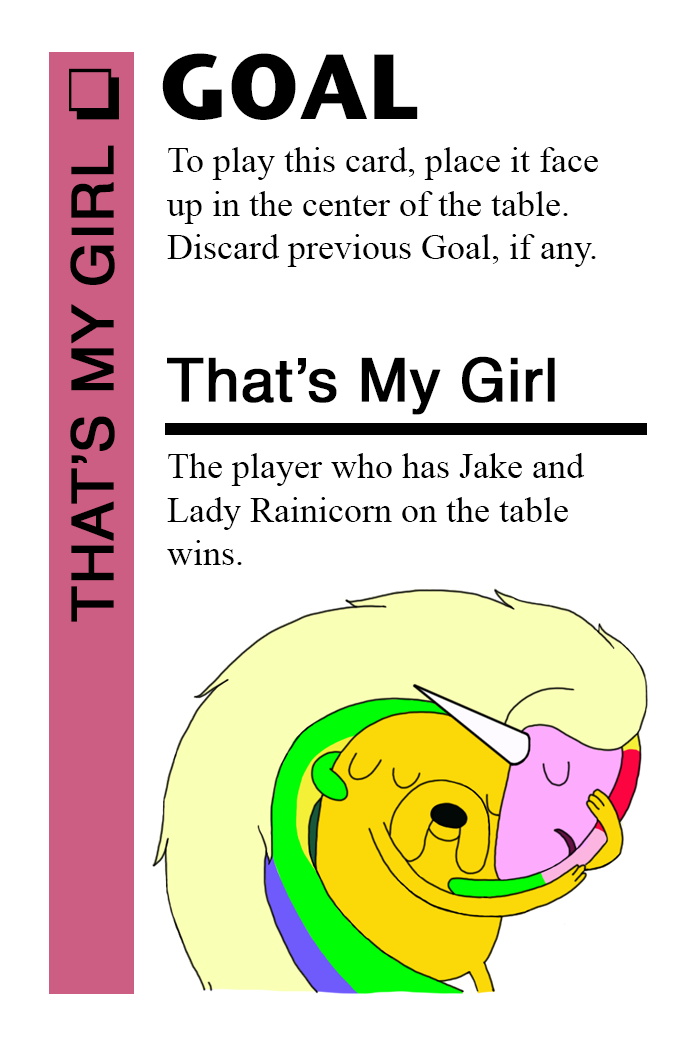
<style>
.page{position:relative;width:700px;height:1042px;background:#ffffff}
.page>*{position:absolute;margin:0}
.t1{font:92px "StoneSansITC-Bold";color:#000000}
.t2{font:72px "MS-Gothic";color:#000000}
.t3{font:58px "Helvetica";color:#000000;font-weight:bold}
.t4{font:36px "TimesNewRomanPSMT";color:#000000}
.t5{font:60px "Helvetica";color:#000000;font-weight:bold}
</style>
<div class="page">
<p class="t1" style="left:162px;top:53px;width:256px;height:67px">GOAL</p>
<p class="t2" style="left:69px;top:68px;width:50px;height:52px">❏</p>
<p class="t3" style="left:70px;top:145px;width:45px;height:477px;rotate:-90deg">THAT’S MY GIRL</p>
<p class="t4" style="left:167px;top:147px;width:431px;height:120px">To play this card, place it face<br>up in the center of the table.<br>Discard previous Goal, if any.</p>
<p class="t5" style="left:167px;top:356px;width:388px;height:59px">That’s My Girl</p>
<p class="t4" style="left:167px;top:453px;width:418px;height:112px">The player who has Jake and <br>Lady Rainicorn on the table <br>wins.</p>
</div>
